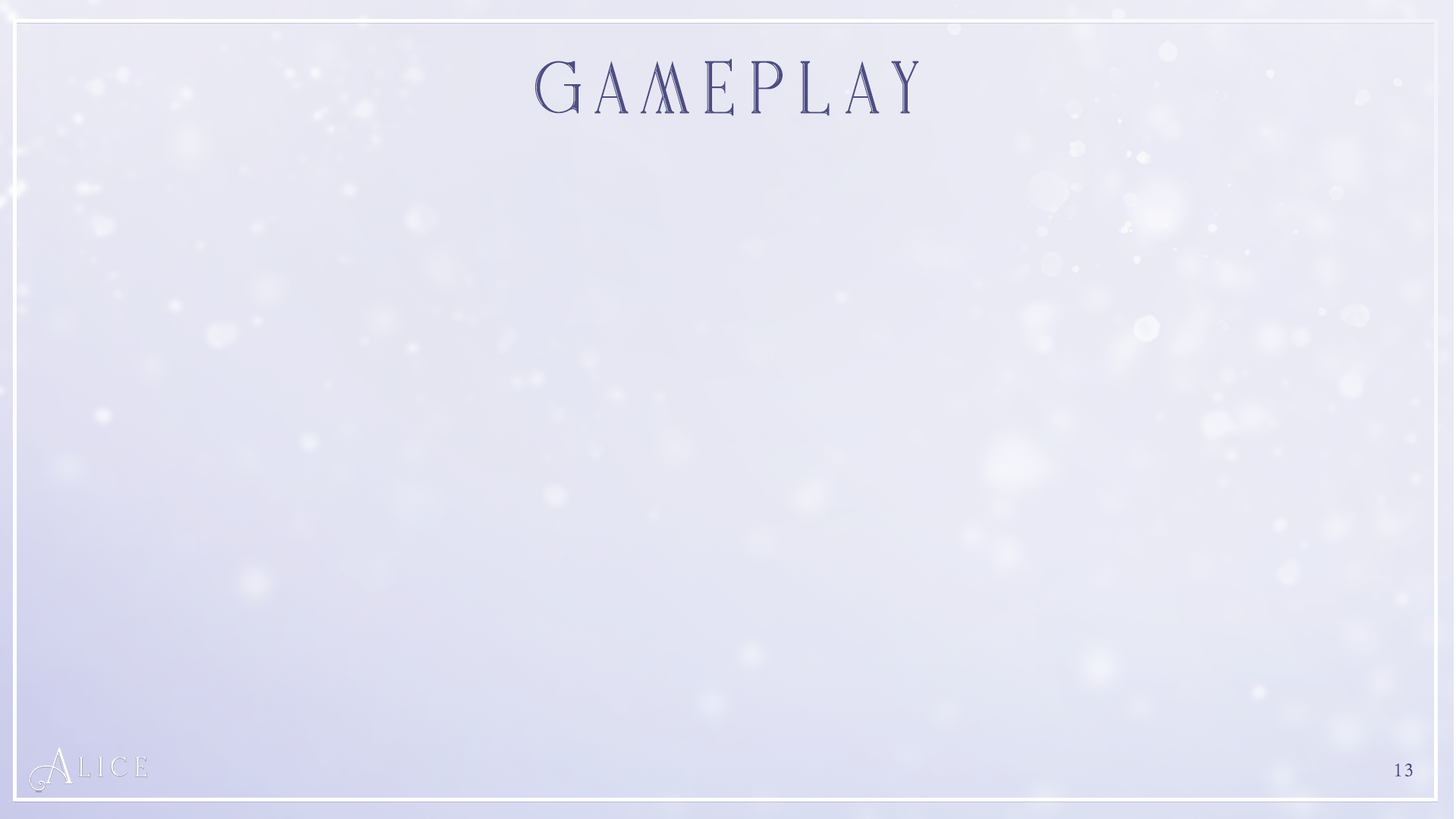
<style>
.page{position:relative;width:1456px;height:819px}
.page>*{position:absolute;margin:0}
.t1{font:113.7px "Fladeoinline";letter-spacing:0.14em;color:#48487c}
.t2{font:18.2px "ThryomanesNormal";letter-spacing:0.14em;color:#48487c}
</style>
<div class="page">
<p class="t1" style="left:535px;top:58px;width:384px;height:58px">gameplay</p>
<p class="t2" style="left:1395px;top:763px;width:18px;height:14px">13</p>
</div>
